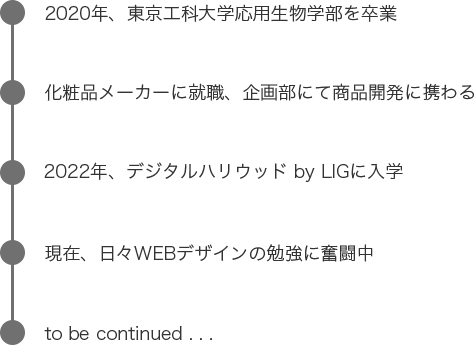
<style>
.page{position:relative;width:476px;height:345px;background:#ffffff}
.page>*{position:absolute;margin:0}
.t1{font:18px "HiraginoSans-W2";color:#333333}
</style>
<div class="page">
<p class="t1" style="left:45px;top:4px;width:352px;height:18px">2020年、東京工科大学応用生物学部を卒業</p>
<p class="t1" style="left:45px;top:83px;width:429px;height:18px">化粧品メーカーに就職、企画部にて商品開発に携わる</p>
<p class="t1" style="left:44px;top:162px;width:359px;height:20px">2022年、デジタルハリウッド by LIGに入学</p>
<p class="t1" style="left:45px;top:244px;width:328px;height:18px">現在、日々WEBデザインの勉強に奮闘中</p>
<p class="t1" style="left:44px;top:326px;width:168px;height:14px">to be continued . . .</p>
</div>
